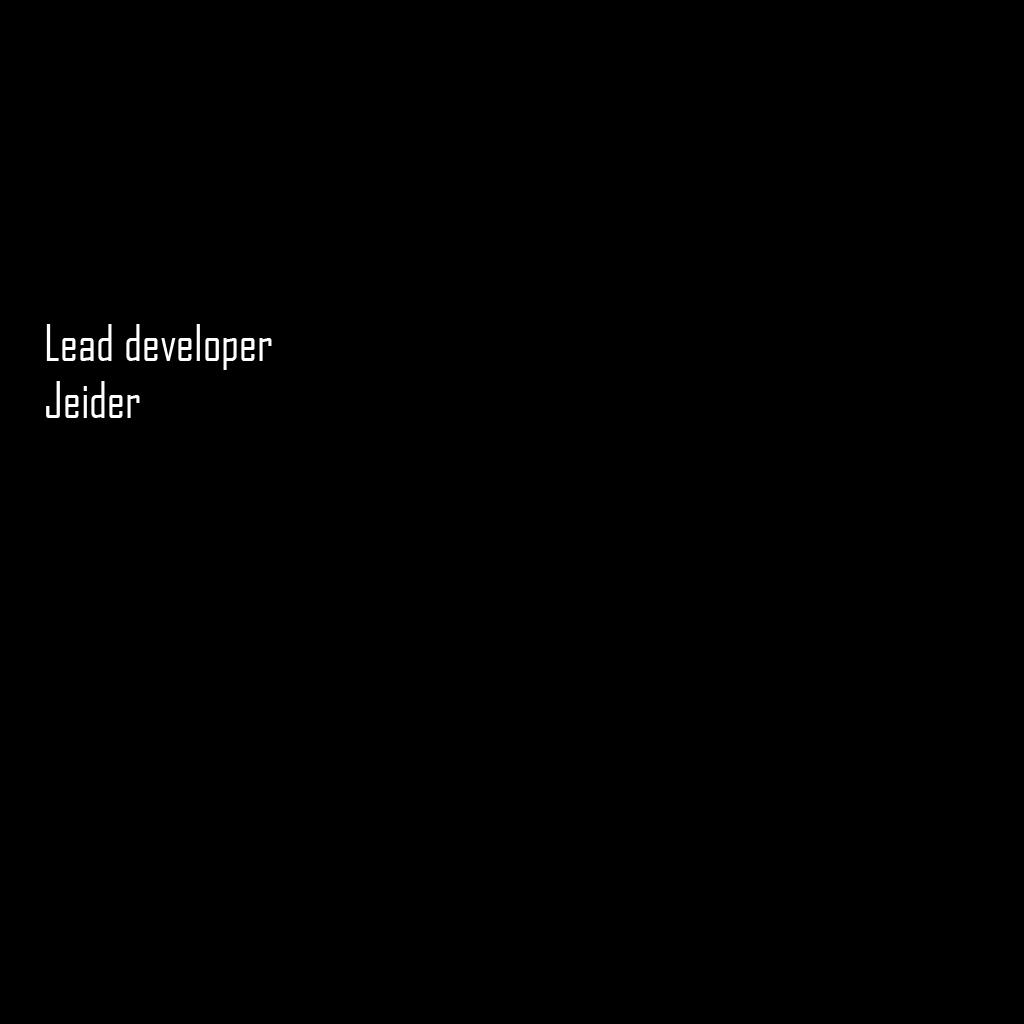
<style>
.page{position:relative;width:1024px;height:1024px;background:#000000}
.page>*{position:absolute;margin:0}
.t1{font:48px "AgencyFBCyrillic";color:#ffffff}
</style>
<div class="page">
<p class="t1" style="left:46px;top:324px;width:226px;height:94px">Lead developer<br>Jeider</p>
</div>
